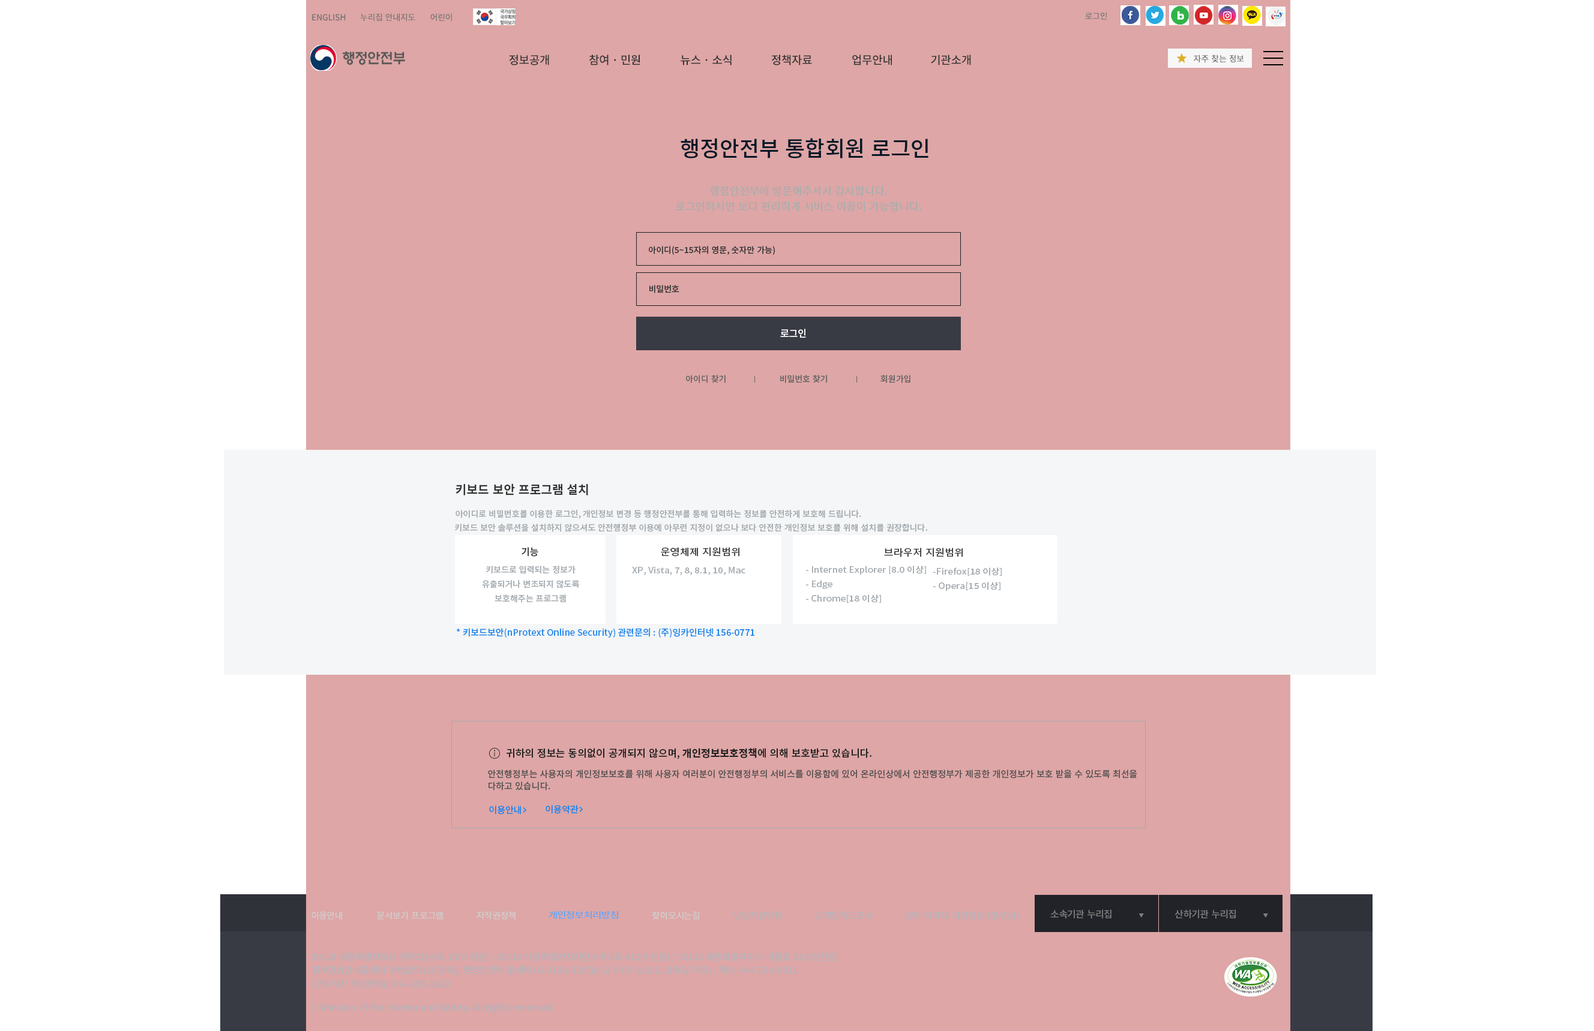
<style>
.page{position:relative;width:1594px;height:1031px;background:#dea6a6}
.page>*{position:absolute;margin:0}
.t1{font:8.4px "NotoSansKR-Medium";letter-spacing:0.01em;color:#707070}
.t2{font:11.4px "NotoSansKR-Medium";letter-spacing:0.01em;color:#333333}
.t3{font:8.4px "NotoSansKR-Medium";letter-spacing:0.01em;color:#666666}
.t4{font:21.6px "NotoSansKR-Medium";color:#061928}
.t5{font:10.8px "NotoSansKR-Medium";color:#acacac}
.t6{font:8.4px "NotoSansKR-Medium";color:#333333}
.t7{font:9.6px "NotoSansKR-Medium";color:#ffffff}
.t8{font:8.4px "NotoSansKR-Medium";color:#676464}
.t9{font:12.2px "NotoSansKR-Bold";color:#333333}
.t10{font:8.4px "NotoSansKR-Medium";color:#a2a8ad}
.t11{font:9.6px "NotoSansKR-Medium";color:#333333}
.t12{font:9.6px "NotoSansKR-Medium";color:#333333;scale:1.1 1}
.t13{font:8.4px/14.4px "NotoSansKR-Medium";color:#a2a8ad}
.t14{font:8.4px "NotoSansKR-Medium";color:#a2a8ad;scale:1.1 1}
.t15{font:8.4px/14.4px "NotoSansKR-Medium";color:#a2a8ad;scale:1.1 1}
.t16{font:9px "NotoSansKR-Medium";color:#1083ec}
.t17{font:10.2px "NotoSansKR-Medium";color:#222222}
.t18{font:10.2px "NotoSansKR-Bold";color:#222222}
.t19{font:9px/12px "NotoSansKR-Medium";color:#575252}
.t20{font:9px "NotoSansKR-Medium";letter-spacing:0.01em;color:#d1d1d1}
.t21{font:8.8px "NotoSansKR-Medium";letter-spacing:0.01em;color:#4fa6ff;scale:1.15 1}
.t22{font:9px "NotoSansKR-Medium";letter-spacing:0.01em;color:#b2b4bc}
.t23{font:9px "NotoSansKR-Medium";letter-spacing:0.01em;color:#b2b4bc;scale:1.04 1}
.t24{font:9.6px "NotoSansKR-Medium";letter-spacing:0.01em;color:#7f7f7f}
</style>
<div class="page">
<p class="t1" style="left:312px;top:14px;width:34px;height:7px">ENGLISH</p>
<p class="t1" style="left:360px;top:13px;width:55px;height:9px">누리집 안내지도</p>
<p class="t1" style="left:430px;top:13px;width:22px;height:8px">어린이</p>
<p class="t1" style="left:1085px;top:12px;width:21px;height:8px">로그인</p>
<p class="t2" style="left:509px;top:55px;width:40px;height:10px">정보공개</p>
<p class="t2" style="left:589px;top:55px;width:51px;height:10px">참여 · 민원</p>
<p class="t2" style="left:680px;top:55px;width:51px;height:10px">뉴스 · 소식</p>
<p class="t2" style="left:771px;top:55px;width:41px;height:10px">정책자료</p>
<p class="t2" style="left:852px;top:55px;width:40px;height:10px">업무안내</p>
<p class="t2" style="left:931px;top:55px;width:40px;height:10px">기관소개</p>
<p class="t3" style="left:1193px;top:55px;width:51px;height:8px">자주 찾는 정보</p>
<p class="t4" style="left:680px;top:138px;width:248px;height:20px">행정안전부 통합회원 로그인</p>
<p class="t5" style="left:710px;top:185px;width:177px;height:11px">행정안전부에 방문해주셔서 감사합니다.</p>
<p class="t5" style="left:676px;top:202px;width:246px;height:10px">로그인하시면 보다 편리하게 서비스 이용이 가능합니다.</p>
<p class="t6" style="left:649px;top:246px;width:126px;height:9px">아이디(5~15자의 영문, 숫자만 가능)</p>
<p class="t6" style="left:649px;top:285px;width:30px;height:8px">비밀번호</p>
<p class="t7" style="left:780px;top:329px;width:26px;height:9px">로그인</p>
<p class="t8" style="left:686px;top:375px;width:39px;height:8px">아이디 찾기</p>
<p class="t8" style="left:780px;top:375px;width:47px;height:8px">비밀번호 찾기</p>
<p class="t8" style="left:880px;top:375px;width:30px;height:8px">회원가입</p>
<p class="t9" style="left:455px;top:484px;width:133px;height:12px">키보드 보안 프로그램 설치</p>
<p class="t10" style="left:455px;top:510px;width:406px;height:9px">아이디로 비밀번호를 이용한 로그인, 개인정보 변경 등 행정안전부를 통해 입력하는 정보를 안전하게 보호해 드립니다.</p>
<p class="t10" style="left:455px;top:524px;width:472px;height:8px">키보드 보안 솔루션을 설치하지 않으셔도 안전행정부 이용에 아무런 지정이 없으나 보다 안전한 개인정보 보호를 위해 설치를 권장합니다.</p>
<p class="t11" style="left:521px;top:547px;width:17px;height:10px">기능</p>
<p class="t12" style="left:661px;top:547px;width:78px;height:10px">운영체제 지원범위</p>
<p class="t12" style="left:884px;top:548px;width:78px;height:9px">브라우저 지원범위</p>
<p class="t13" style="left:482px;top:566px;width:98px;height:37px;text-align:center">키보드로 입력되는 정보가<br>유출되거나 변조되지 않도록<br>보호해주는 프로그램</p>
<p class="t14" style="left:632px;top:567px;width:113px;height:8px">XP, Vista, 7, 8, 8.1, 10, Mac</p>
<p class="t15" style="left:806px;top:566px;width:120px;height:37px">- Internet Explorer [8.0 이상]<br>- Edge<br>- Chrome[18 이상]</p>
<p class="t15" style="left:933px;top:568px;width:68px;height:23px">-Firefox[18 이상]<br>- Opera[15 이상]</p>
<p class="t16" style="left:456px;top:628px;width:299px;height:10px">* 키보드보안(nProtext Online Security) 관련문의 : (주)잉카인터넷 156-0771</p>
<p class="t17" style="left:506px;top:748px;width:365px;height:12px">귀하의 정보는 동의없이 공개되지 않으며, <span class="t18">개인정보보호정책</span>에 의해 보호받고 있습니다.</p>
<p class="t19" style="left:488px;top:770px;width:649px;height:21px">안전행정부는 사용자의 개인정보보호를 위해 사용자 여러분이 안전행정부의 서비스를 이용함에 있어 온라인상에서 안전행정부가 제공한 개인정보가 보호 받을 수 있도록 최선을<br>다하고 있습니다.</p>
<p class="t16" style="left:489px;top:806px;width:32px;height:9px">이용안내</p>
<p class="t16" style="left:545px;top:805px;width:33px;height:9px">이용약관</p>
<p class="t20" style="left:311px;top:911px;width:31px;height:9px">이용안내</p>
<p class="t20" style="left:377px;top:911px;width:66px;height:9px">문서보기 프로그램</p>
<p class="t20" style="left:476px;top:911px;width:39px;height:9px">저작권정책</p>
<p class="t21" style="left:548px;top:911px;width:70px;height:9px">개인정보처리방침</p>
<p class="t20" style="left:652px;top:911px;width:48px;height:9px">찾아오시는길</p>
<p class="t22" style="left:734px;top:911px;width:47px;height:9px">담당자연락처</p>
<p class="t23" style="left:815px;top:911px;width:58px;height:9px">고객만족도조사</p>
<p class="t23" style="left:905px;top:911px;width:113px;height:10px">정부·지자체 기관정보 (정부24)</p>
<p class="t24" style="left:1050px;top:910px;width:61px;height:9px">소속기관 누리집</p>
<p class="t24" style="left:1174px;top:910px;width:61px;height:9px">산하기관 누리집</p>
<p class="t23" style="left:311px;top:953px;width:527px;height:9px">30128 세종특별자치시 정부2청사로 13(나성동) / 30116 세종특별자치시한누리대로 411(어진동) / 30116 세종특별자치시 가름로 143(어진동)</p>
<p class="t23" style="left:312px;top:966px;width:485px;height:10px">정부민원안내콜센터 국번없이110(무료), 행정안전부 콜센터 02-2100-339(월~금 9:00~18:00, 공휴일 제외) / 팩스 044-204-8911</p>
<p class="t23" style="left:312px;top:980px;width:137px;height:9px">(근무시간 외) 당직실 044-205-1600</p>
<p class="t23" style="left:310px;top:1003px;width:244px;height:10px">ⓒ Ministry of the Interior and Safety. All rights reserved.</p>
</div>
